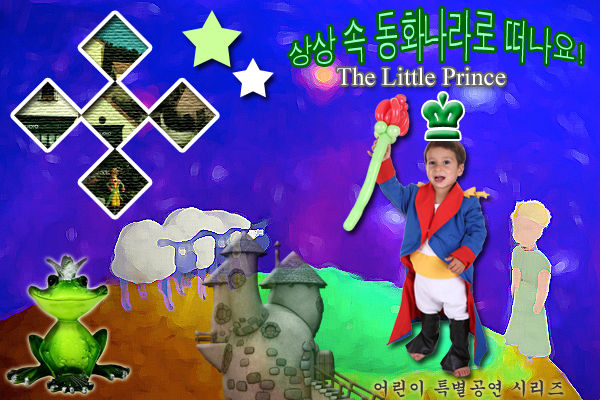
<style>
.page{position:relative;width:600px;height:400px}
.page>*{position:absolute;margin:0}
.t1{font:24px/50px "Dotum";color:#99ffcc}
.t2{font:25px "TimesNewRomanPSMT";color:#ffffff}
.t3{font:18px "Gungsuh";color:#333333}
</style>
<div class="page">
<p class="t1" style="left:289px;top:8px;width:293px;height:58px">상상 속 동화나라로 떠나요!</p>
<p class="t2" style="left:337px;top:67px;width:169px;height:19px">The Little Prince</p>
<p class="t3" style="left:374px;top:379px;width:190px;height:19px">어린이 특별공연 시리즈</p>
</div>
